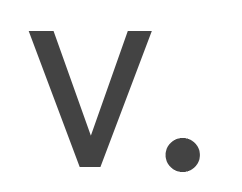
<style>
.page{position:relative;width:242px;height:192px;background:#ffffff}
.page>*{position:absolute;margin:0}
.t1{font:250px "Tahoma";color:#434343}
.t2{font:100px "Tahoma";color:#434343}
</style>
<div class="page">
<p class="t1" style="left:28px;top:31px;width:124px;height:136px">v</p>
<p class="t2" style="left:165px;top:138px;width:35px;height:34px">•</p>
</div>
